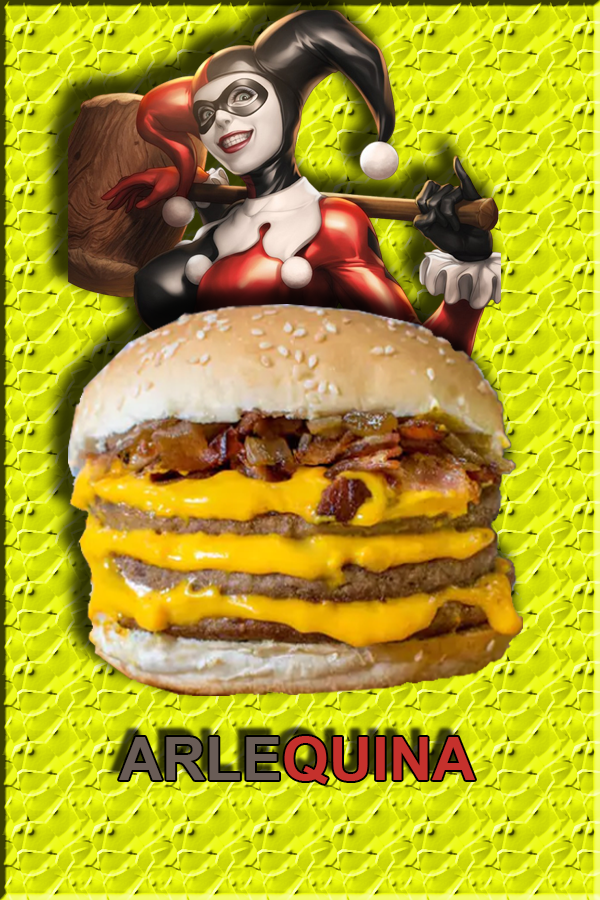
<style>
.page{position:relative;width:600px;height:900px}
.page>*{position:absolute;margin:0}
.t1{font:60px "Arial-BoldMT";color:#c5312c}
.t2{font:60px "Arial-BoldMT";color:#695c56}
</style>
<div class="page">
<p class="t1" style="left:119px;top:736px;width:356px;height:48px"><span class="t2">ARLE</span>QUINA</p>
</div>
